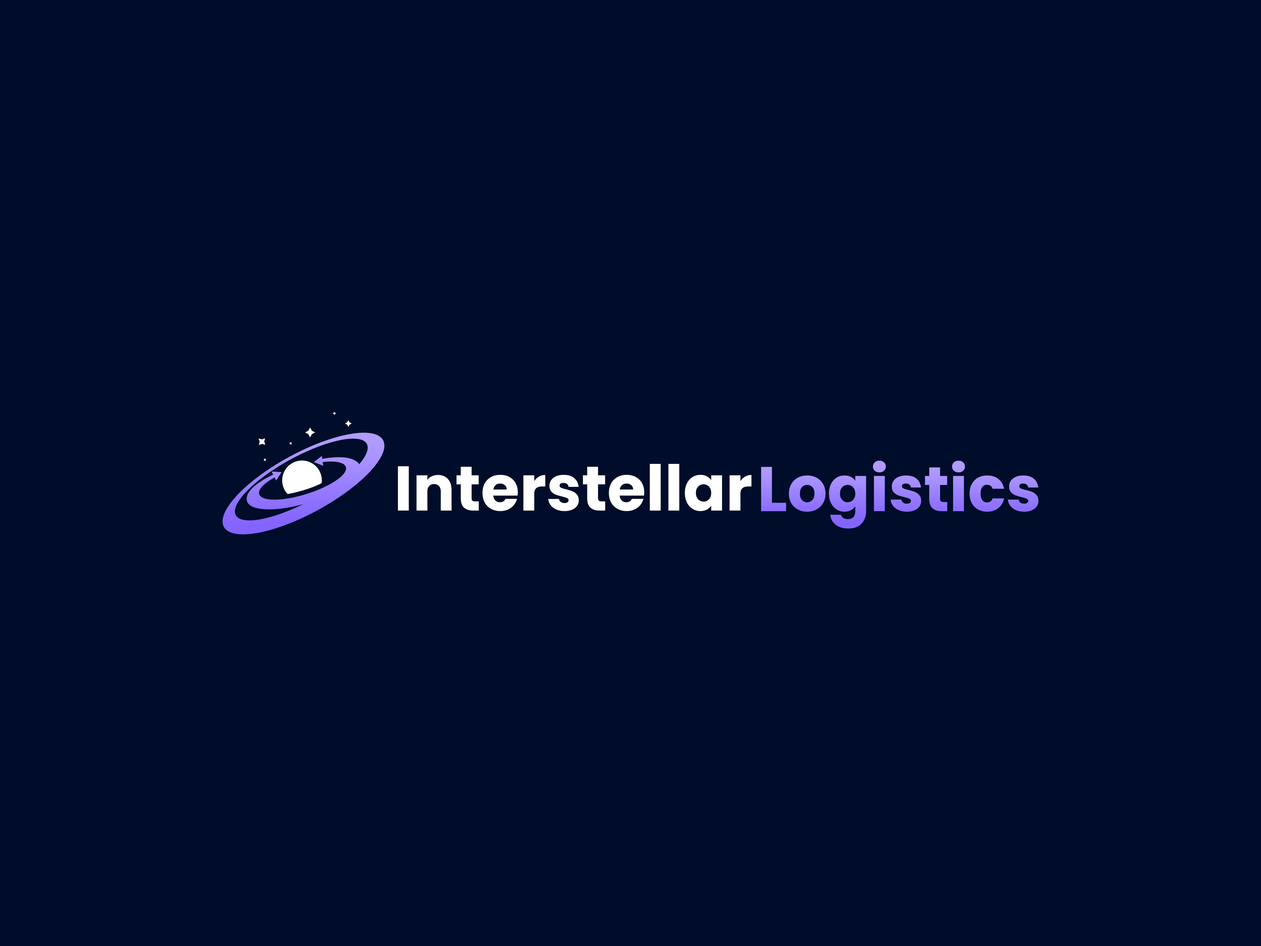
<style>
.page{position:relative;width:1261px;height:946px;background:#000d2a}
.page>*{position:absolute;margin:0}
.t1{font:63px "Poppins-Bold";color:#9b81ff}
.t2{font:63px "Poppins-Bold";color:#ffffff}
</style>
<div class="page">
<p class="t1" style="left:761px;top:461px;width:277px;height:67px">Logistics</p>
<p class="t2" style="left:398px;top:464px;width:354px;height:47px">Interstellar</p>
</div>
